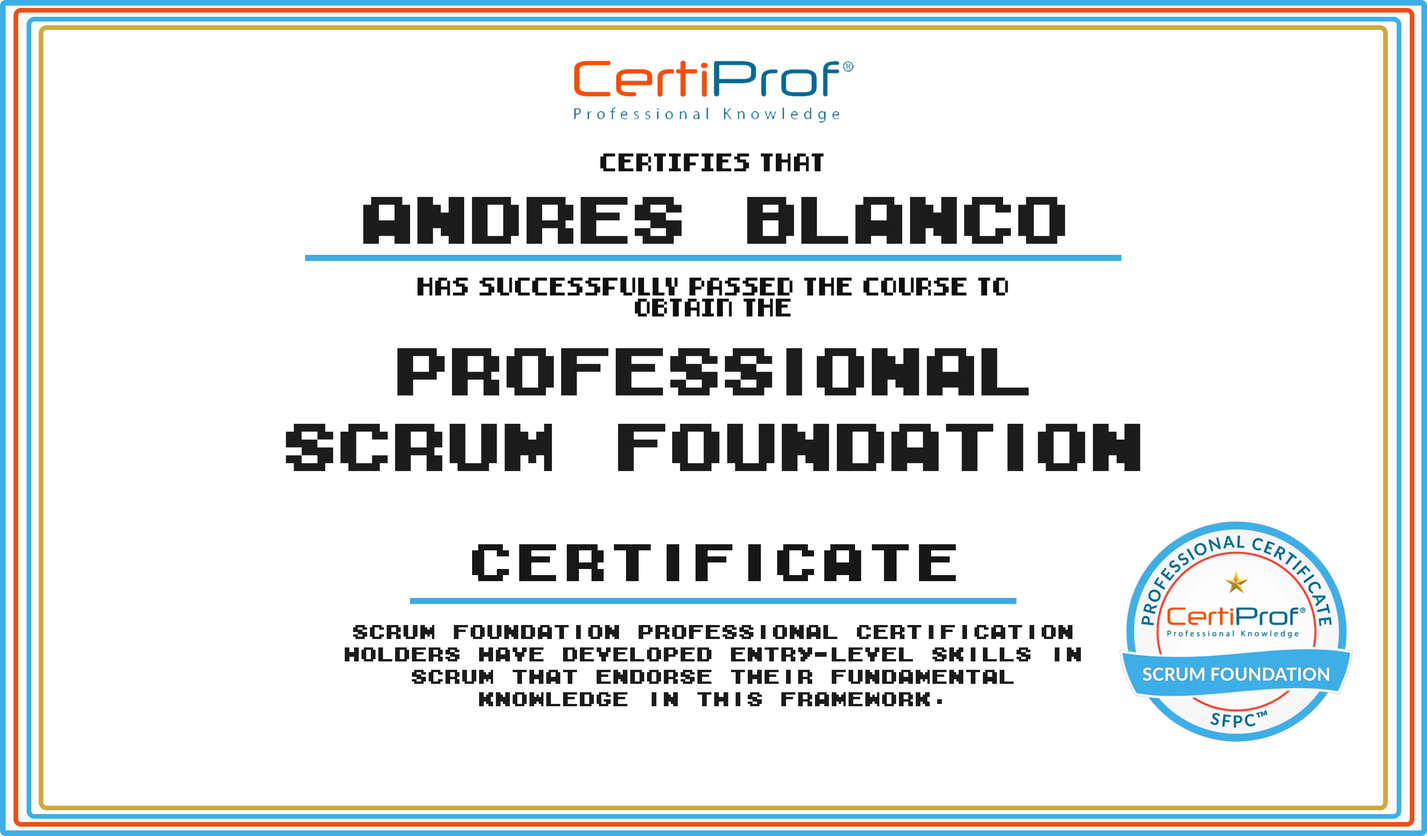
<style>
.page{position:relative;width:1427px;height:836px;background:#ffffff}
.page>*{position:absolute;margin:0}
.t1{font:17.8px "8-bit-pusab";color:#141414}
.t2{font:62.4px "M04_FATAL-FURY-BLACK";letter-spacing:-0.1em;color:#1c1c1c}
.t3{font:17.8px "8-bit-pusab";color:#111111}
.t4{font:63px "M04_FATAL-FURY-BLACK";letter-spacing:-0.1em;color:#1c1c1c}
.t5{font:49.1px "M04_FATAL-FURY-BLACK";color:#171717}
.t6{font:18.7px "M04_FATAL-FURY-BLACK";letter-spacing:-0.1em;color:#1c1c1c}
</style>
<div class="page">
<p class="t1" style="left:600px;top:153px;width:224px;height:18px">certifies that</p>
<p class="t2" style="left:363px;top:196px;width:703px;height:48px">Andres Blanco</p>
<p class="t3" style="left:418px;top:277px;width:590px;height:39px;text-align:center">has successfully passed the course to  obtain the</p>
<p class="t4" style="left:286px;top:348px;width:855px;height:123px;text-align:center">Professional Scrum Foundation</p>
<p class="t5" style="left:472px;top:544px;width:484px;height:37px">Certificate</p>
<p class="t6" style="left:345px;top:625px;width:736px;height:81px;text-align:center">Scrum Foundation Professional Certification holders have developed entry-level skills in Scrum that endorse their fundamental knowledge in this framework.</p>
</div>
